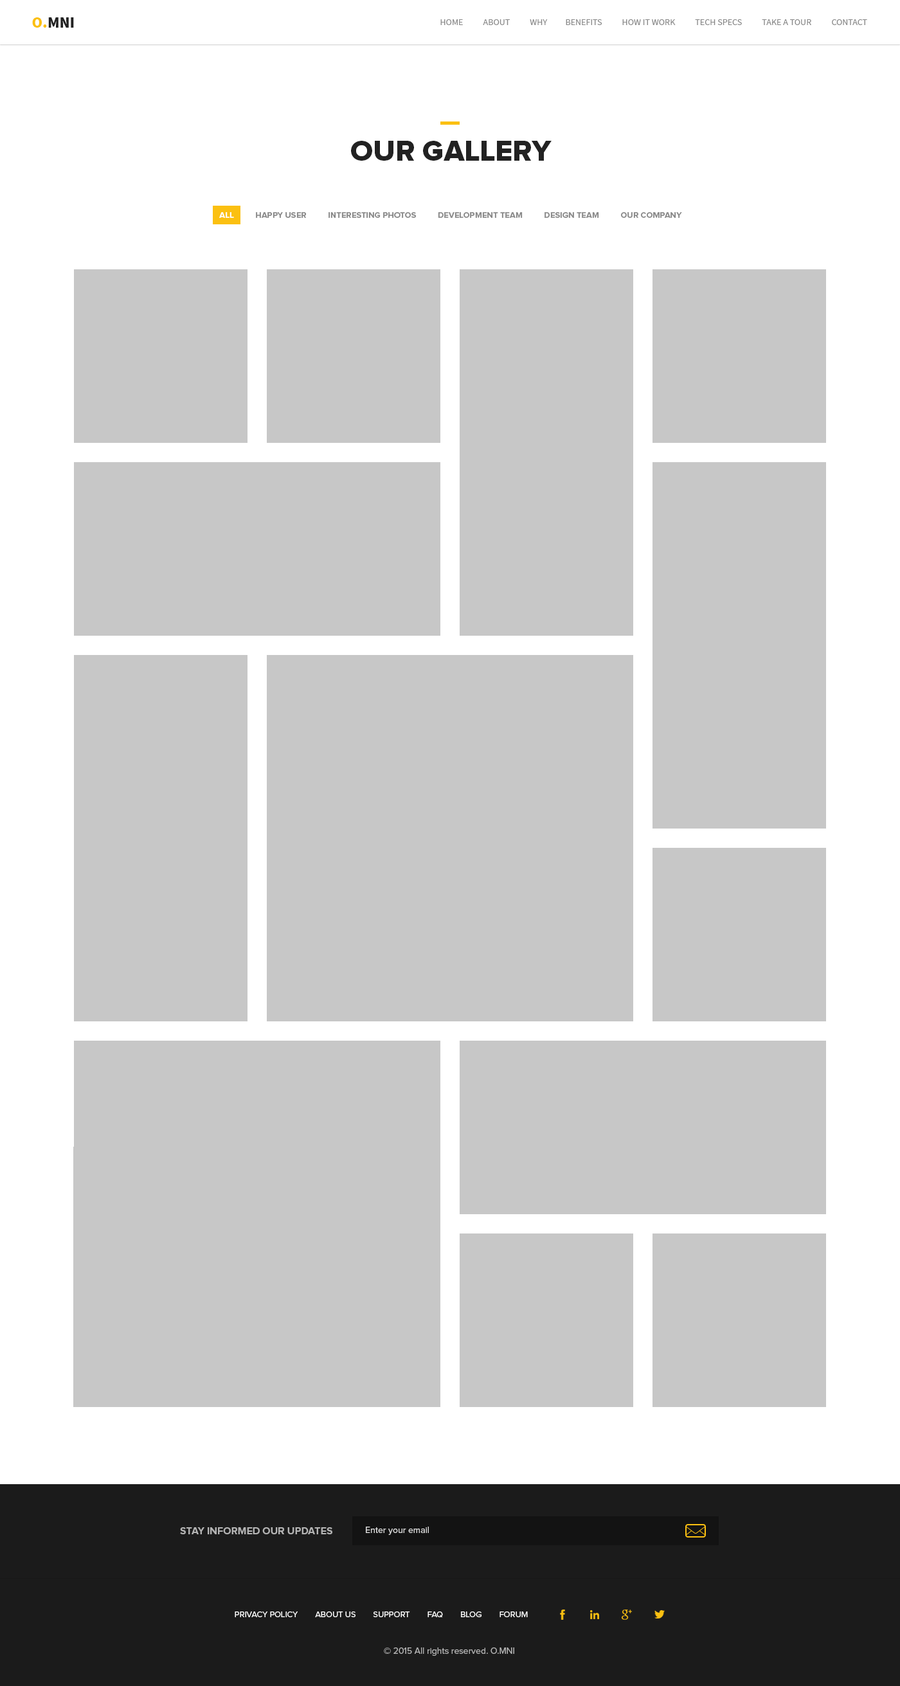
<style>
.page{position:relative;width:900px;height:1686px;background:#c7c7c7}
.page>*{position:absolute;margin:0}
.t1{font:15.4px "SourceSansPro-Black";color:#222222;text-transform:uppercase}
.t2{font:15.4px "SourceSansPro-Black";color:#fbc011;text-transform:uppercase}
.t3{font:9px "SourceSansPro-Regular";color:#888888;text-transform:uppercase}
.t4{font:29.6px "ProximaNova-Extrabld";color:#222222;text-transform:uppercase}
.t5{font:8.4px "ProximaNova-Bold";color:#888888;text-transform:uppercase}
.t6{font:8.4px "ProximaNova-Bold";color:#ffffff;text-transform:uppercase}
.t7{font:10.3px "ProximaNova-Bold";color:#b4b4b4;text-transform:uppercase}
.t8{font:9px "ProximaNova-Regular";color:#dddddd}
.t9{font:8.4px "ProximaNova-Regular";color:#ffffff;text-transform:uppercase}
.t10{font:9px "ProximaNova-Regular";color:#b4b4b4}
</style>
<div class="page">
<p class="t1" style="left:32px;top:17px;width:42px;height:11px"><span class="t2">o.</span>mni</p>
<p class="t1" style="left:32px;top:17px;width:42px;height:11px"><span class="t2">o.</span>mni</p>
<p class="t3" style="left:440px;top:19px;width:427px;height:6px">Home           about           Why          benefits           how it work           tech specs           take a tour           contact</p>
<p class="t3" style="left:440px;top:19px;width:427px;height:6px">Home           about           Why          benefits           how it work           tech specs           take a tour           contact</p>
<p class="t4" style="left:351px;top:141px;width:201px;height:20px">our gallery</p>
<p class="t5" style="left:219px;top:212px;width:463px;height:6px"><span class="t6">all </span>         happy user          interesting photos          development team          design team          our company</p>
<p class="t7" style="left:180px;top:1527px;width:152px;height:7px">Stay informed our updates</p>
<p class="t8" style="left:366px;top:1527px;width:63px;height:8px">Enter your email</p>
<p class="t9" style="left:235px;top:1612px;width:293px;height:6px">Privacy Policy        About Us        Support        FAQ        Blog        Forum</p>
<p class="t10" style="left:384px;top:1648px;width:130px;height:8px">© 2015 All rights reserved. O.MNI</p>
</div>
